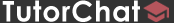
<style>
.page{position:relative;width:174px;height:23px;background:#333333}
.page>*{position:absolute;margin:0}
.t1{font:28.6px "CenturyGothic-Bold";letter-spacing:0.025em;color:#ffffff}
</style>
<div class="page">
<p class="t1" style="left:2px;top:0px;width:138px;height:22px">TutorChat</p>
</div>
